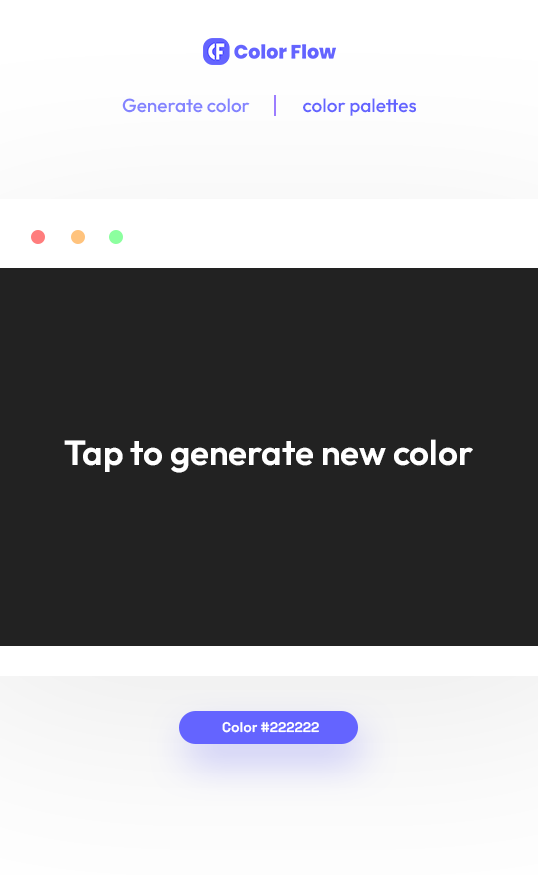
<style>
.page{position:relative;width:538px;height:875px;background:#222222}
.page>*{position:absolute;margin:0}
.t1{font:18.9px "Outfit-Medium";color:#8383ff}
.t2{font:18.9px "Outfit-Medium";color:#6464ff}
.t3{font:35px "Outfit-SemiBold";color:#ffffff}
.t4{font:13.9px "SpaceGrotesk-Bold";color:#ffffff}
</style>
<div class="page">
<p class="t1" style="left:122px;top:98px;width:128px;height:15px">Generate color</p>
<p class="t2" style="left:303px;top:98px;width:113px;height:18px">color palettes</p>
<p class="t3" style="left:64px;top:439px;width:409px;height:34px">Tap to generate new color</p>
<p class="t4" style="left:222px;top:721px;width:97px;height:12px">Color #222222</p>
</div>
